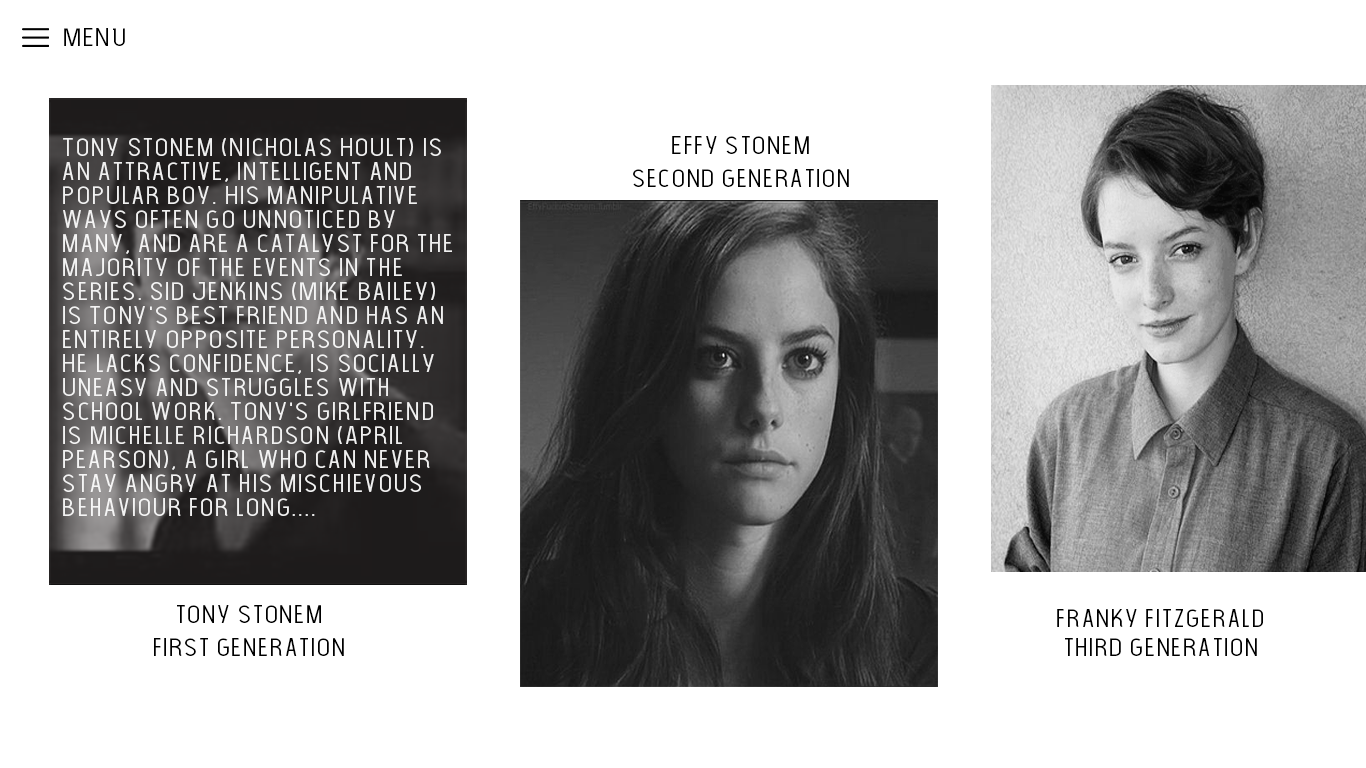
<style>
.page{position:relative;width:1366px;height:768px;background:#ffffff}
.page>*{position:absolute;margin:0}
.t1{font:24px "TheLightFont";color:#000000;scale:1.2 1}
.t2{font:24px/24px "TheLightFont";color:#000000;scale:1.2 1}
.t3{font:24px/5.4px "TheLightFont";color:#000000;scale:1.2 1}
.t4{font:24px/24px "TheLightFont";color:#ffffff;scale:1.22 1}
</style>
<div class="page">
<p class="t1" style="left:64px;top:28px;width:61px;height:18px">MENU</p>
<p class="t2" style="left:633px;top:136px;width:216px;height:51px;text-align:center"><span class="t3">Effy stonem<br><br></span>second generation</p>
<p class="t4" style="left:63px;top:138px;width:389px;height:378px">Tony Stonem (Nicholas Hoult) is an attractive, intelligent and popular boy. His manipulative ways often go unnoticed by many, and are a catalyst for the majority of the events in the series. Sid Jenkins (Mike Bailey) is Tony's best friend and has an entirely opposite personality. He lacks confidence, is socially uneasy and struggles with school work. Tony's girlfriend is Michelle Richardson (April Pearson), a girl who can never stay angry at his mischievous behaviour for long....</p>
<p class="t2" style="left:154px;top:605px;width:190px;height:51px;text-align:center">tony stonem<br><br>first generation</p>
<p class="t3" style="left:1057px;top:609px;width:206px;height:47px;text-align:center">franky fitzgerald<br><br><span class="t2">third generation</span></p>
</div>
